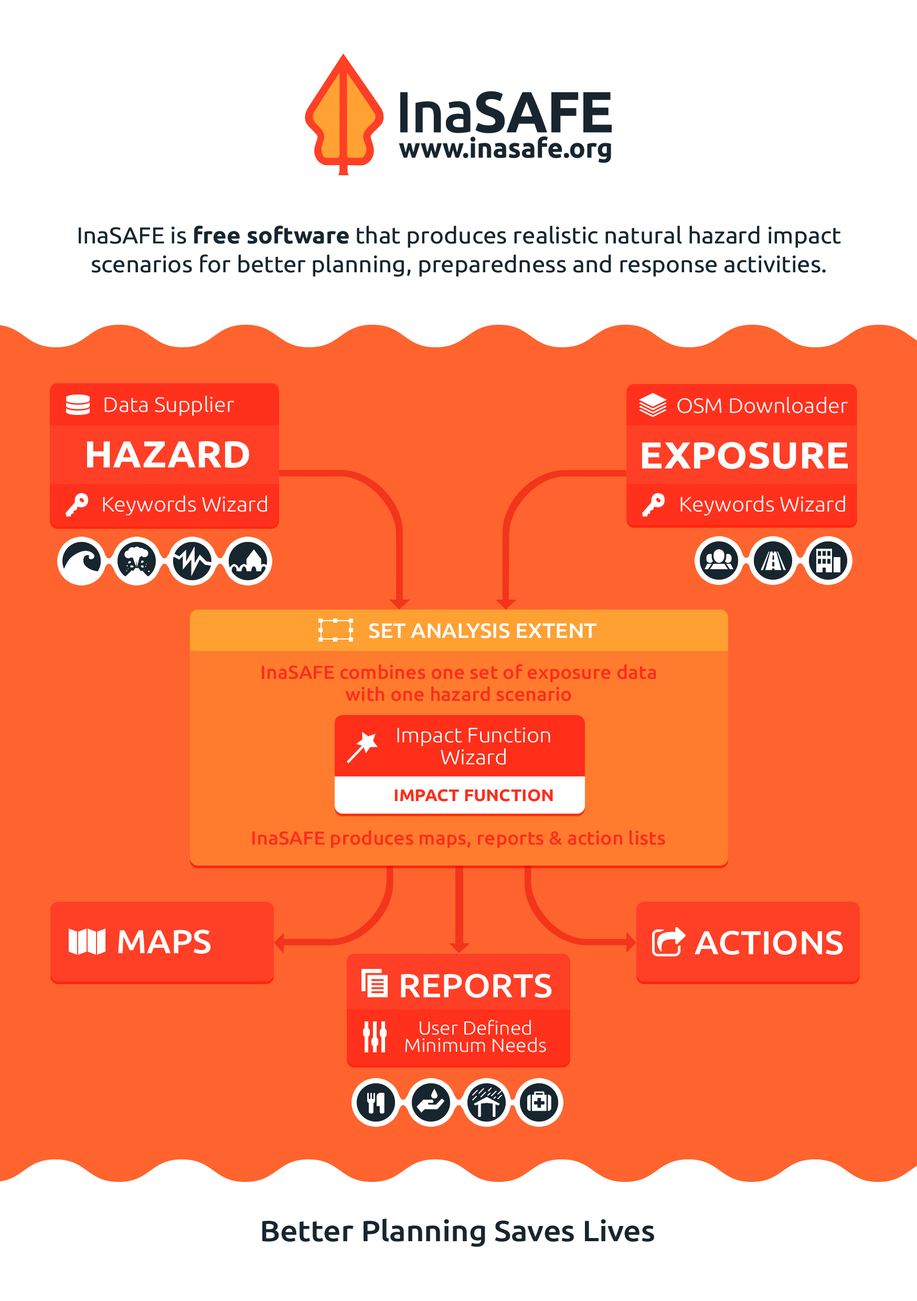
<style>
.page{position:relative;width:917px;height:1301px;background:#ff632e}
.page>*{position:absolute;margin:0}
.t1{font:22.8px "Ubuntu";color:#18252e;scale:1.05 1}
.t2{font:22.8px "Ubuntu-Bold";color:#18252e;scale:1.05 1}
.t3{font:20.8px "Ubuntu-Light";color:#ffffff;scale:1.05 1}
.t4{font:37.4px "Ubuntu-Bold";color:#ffffff;text-transform:uppercase;scale:1.06 1}
.t5{font:20.8px "Ubuntu-Medium";color:#ffffff;text-transform:uppercase;scale:1.05 1}
.t6{font:18.7px/21.9px "Ubuntu-Medium";color:#fc2d1c;scale:1.05 1}
.t7{font:20.8px/21.9px "Ubuntu-Light";color:#ffffff;scale:1.05 1}
.t8{font:16.6px "Ubuntu-Bold";color:#fc2d1c;text-transform:uppercase;scale:1.05 1}
.t9{font:18.7px "Ubuntu-Medium";color:#fc2d1c;scale:1.05 1}
.t10{font:33.2px "Ubuntu-Medium";color:#ffffff;scale:1.05 1}
.t11{font:33.2px "Ubuntu-Medium";color:#ffffff;text-transform:uppercase;scale:1.05 1}
.t12{font:18.7px/17.5px "Ubuntu-Light";color:#ffffff;scale:1.05 1}
.t13{font:29.1px "Ubuntu-Medium";color:#18252e;scale:1.07 1}
</style>
<div class="page">
<p class="t1" style="left:79px;top:226px;width:762px;height:51px;text-align:center">InaSAFE is <span class="t2">free software</span> that produces realistic natural hazard impact scenarios for better planning, preparedness and response activities.</p>
<p class="t3" style="left:104px;top:395px;width:130px;height:21px">Data Supplier</p>
<p class="t3" style="left:677px;top:396px;width:171px;height:17px">OSM Downloader</p>
<p class="t4" style="left:87px;top:441px;width:162px;height:27px">Hazard</p>
<p class="t4" style="left:642px;top:442px;width:206px;height:27px">Exposure</p>
<p class="t3" style="left:103px;top:495px;width:164px;height:21px">Keywords Wizard</p>
<p class="t3" style="left:680px;top:495px;width:165px;height:21px">Keywords Wizard</p>
<p class="t5" style="left:369px;top:623px;width:227px;height:15px">Set analysis extent</p>
<p class="t6" style="left:262px;top:664px;width:394px;height:37px;text-align:center">InaSAFE combines one set of exposure data with one hazard scenario</p>
<p class="t7" style="left:397px;top:727px;width:153px;height:38px;text-align:center">Impact Function<br>Wizard</p>
<p class="t8" style="left:394px;top:789px;width:159px;height:12px">Impact Function</p>
<p class="t9" style="left:252px;top:830px;width:413px;height:18px">InaSAFE produces maps, reports &amp; action lists</p>
<p class="t10" style="left:118px;top:929px;width:93px;height:24px">MAPS</p>
<p class="t11" style="left:694px;top:930px;width:149px;height:25px">actions</p>
<p class="t11" style="left:401px;top:973px;width:151px;height:25px">reports</p>
<p class="t12" style="left:405px;top:1020px;width:141px;height:32px;text-align:center">User Defined<br>Minimum Needs</p>
<p class="t13" style="left:262px;top:1218px;width:392px;height:29px">Better Planning Saves Lives</p>
</div>
